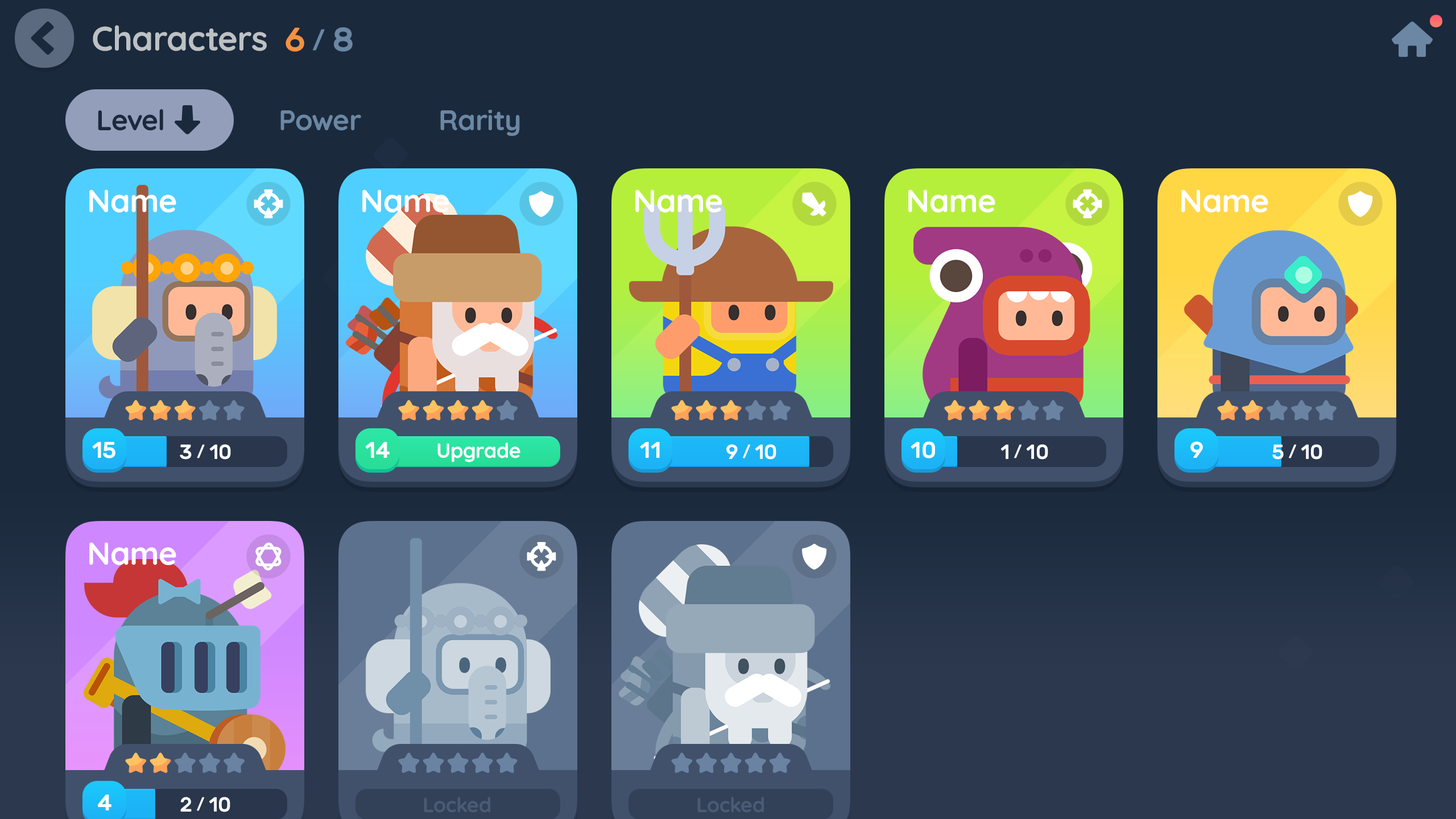
<style>
.page{position:relative;width:1456px;height:819px;background:#1a293c}
.page>*{position:absolute;margin:0}
.t1{font:34.1px "Quicksand-Bold";letter-spacing:-0.01em;color:#bdc1c4}
.t2{font:33.6px "Rubik-Medium";letter-spacing:-0.01em;color:#f8913f}
.t3{font:24.3px "Rubik-Medium";letter-spacing:-0.01em;color:#6b87a3}
.t4{font:33.6px "Rubik-Medium";letter-spacing:-0.01em;color:#6b87a3}
.t5{font:28.4px "Quicksand-Bold";letter-spacing:-0.01em;color:#1a293c}
.t6{font:28.4px "Quicksand-Bold";letter-spacing:-0.01em;color:#6b87a3}
.t7{font:31.8px "Quicksand-Bold";letter-spacing:-0.01em;color:#ffffff}
.t8{font:22.7px "Rubik-Medium";letter-spacing:-0.01em;color:#ffffff}
.t9{font:20.5px "Rubik-Medium";letter-spacing:-0.01em;color:#ffffff;text-transform:uppercase}
.t10{font:15.4px "Rubik-Medium";letter-spacing:-0.01em;color:#ffffff;text-transform:uppercase}
.t11{font:20.5px "Quicksand-Bold";letter-spacing:-0.01em;color:#ffffff}
.t12{font:20.5px "Quicksand-Bold";letter-spacing:-0.01em;color:#4a5b76}
</style>
<div class="page">
<p class="t1" style="left:93px;top:25px;width:174px;height:26px">Characters</p>
<p class="t2" style="left:286px;top:27px;width:67px;height:25px">6 <span class="t3">/</span><span class="t4"> 8</span></p>
<p class="t5" style="left:98px;top:109px;width:65px;height:22px">Level</p>
<p class="t6" style="left:280px;top:110px;width:81px;height:21px">Power</p>
<p class="t6" style="left:440px;top:110px;width:80px;height:26px">Rarity</p>
<p class="t7" style="left:89px;top:189px;width:87px;height:24px">Name</p>
<p class="t7" style="left:362px;top:189px;width:87px;height:24px">Name</p>
<p class="t7" style="left:635px;top:189px;width:87px;height:24px">Name</p>
<p class="t7" style="left:908px;top:189px;width:87px;height:24px">Name</p>
<p class="t7" style="left:1181px;top:189px;width:87px;height:24px">Name</p>
<p class="t8" style="left:92px;top:442px;width:23px;height:16px">15</p>
<p class="t9" style="left:180px;top:444px;width:51px;height:16px">3 <span class="t10">/</span> 10</p>
<p class="t8" style="left:365px;top:442px;width:25px;height:16px">14</p>
<p class="t11" style="left:437px;top:442px;width:83px;height:20px">Upgrade</p>
<p class="t8" style="left:640px;top:442px;width:20px;height:16px">11</p>
<p class="t9" style="left:726px;top:444px;width:50px;height:16px">9 <span class="t10">/</span> 10</p>
<p class="t8" style="left:911px;top:441px;width:24px;height:17px">10</p>
<p class="t9" style="left:1000px;top:444px;width:48px;height:16px">1 <span class="t10">/</span> 10</p>
<p class="t8" style="left:1190px;top:441px;width:13px;height:17px">9</p>
<p class="t9" style="left:1272px;top:444px;width:50px;height:16px">5 <span class="t10">/</span> 10</p>
<p class="t7" style="left:89px;top:542px;width:87px;height:23px">Name</p>
<p class="t8" style="left:98px;top:795px;width:13px;height:15px">4</p>
<p class="t9" style="left:180px;top:797px;width:50px;height:15px">2 <span class="t10">/</span> 10</p>
<p class="t12" style="left:424px;top:797px;width:66px;height:16px">Locked</p>
<p class="t12" style="left:697px;top:797px;width:67px;height:16px">Locked</p>
</div>
